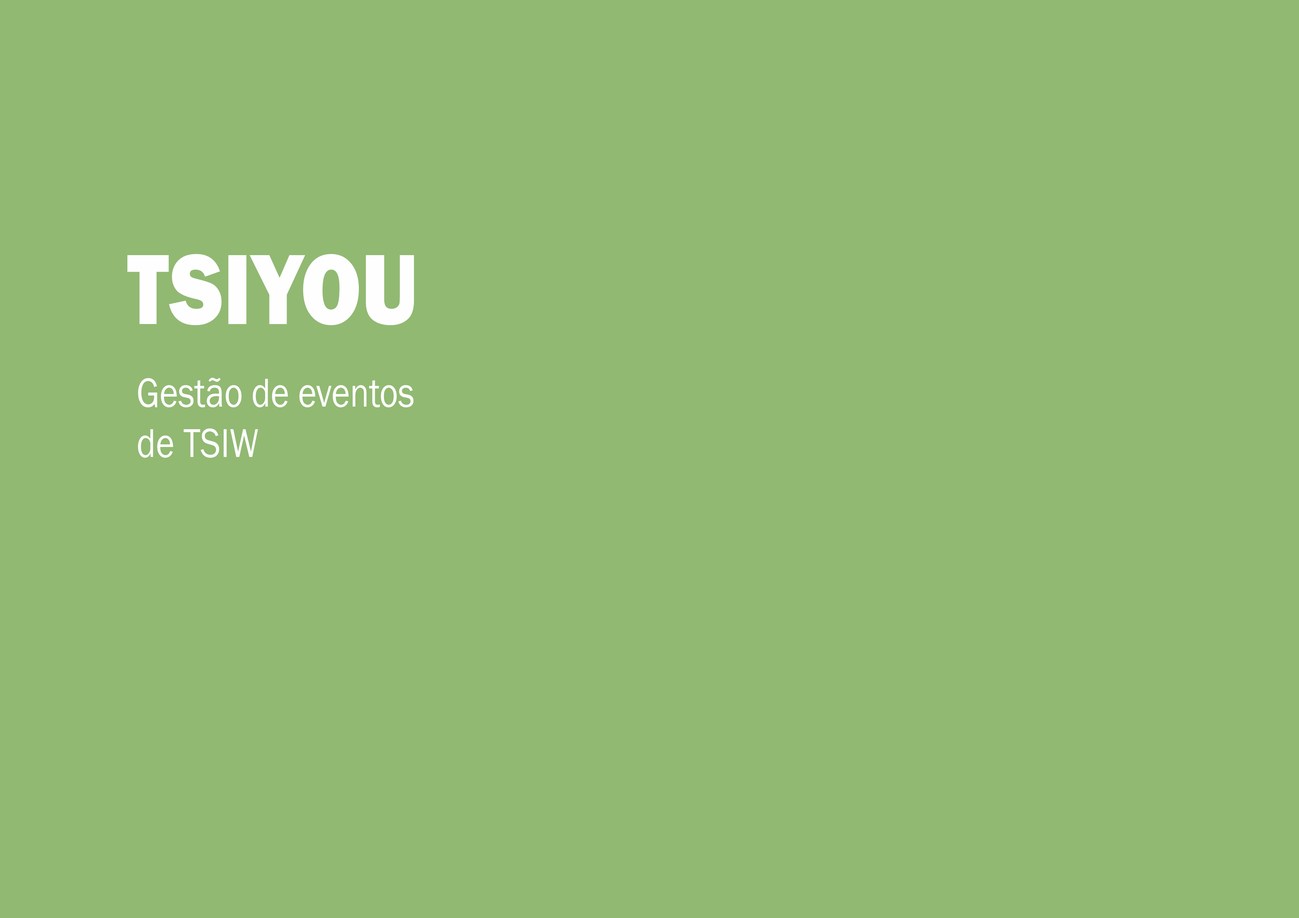
<style>
.page{position:relative;width:1299px;height:918px;background:#91b972}
.page>*{position:absolute;margin:0}
.t1{font:103.3px "FranklinGothic-Heavy";color:#fefefe;scale:0.85 1}
.t2{font:41.8px "FranklinGothic-Book";color:#fefefe;scale:0.85 1}
</style>
<div class="page">
<p class="t1" style="left:127px;top:254px;width:287px;height:71px">TSIYOU</p>
<p class="t2" style="left:138px;top:378px;width:276px;height:80px">Gestão de eventos<br>de TSIW</p>
</div>
